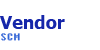
<style>
.page{position:relative;width:100px;height:50px;background:#ffffff}
.page>*{position:absolute;margin:0}
.t1{font:18px "Tahoma-Bold";color:#1627aa}
.t2{font:13px "Fixedsys";color:#3264d6}
</style>
<div class="page">
<p class="t1" style="left:0px;top:15px;width:65px;height:14px">Vendor</p>
<p class="t2" style="left:1px;top:33px;width:19px;height:8px">SCM</p>
</div>
